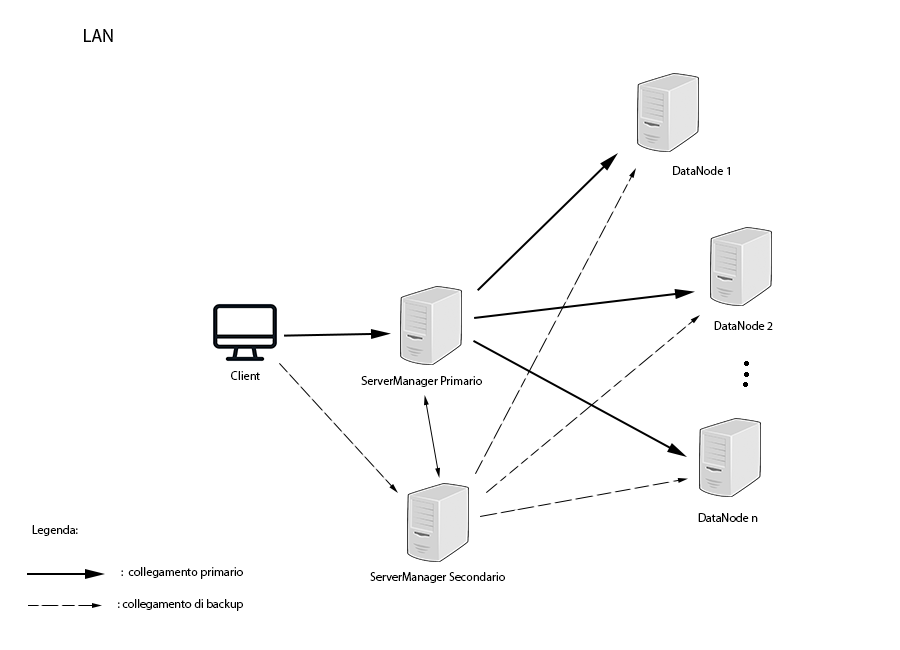
<style>
.page{position:relative;width:900px;height:650px;background:#ffffff}
.page>*{position:absolute;margin:0}
.t1{font:18px "MyriadPro-Regular";color:#000000}
.t2{font:12px "MyriadPro-Regular";color:#000000}
</style>
<div class="page">
<p class="t1" style="left:84px;top:29px;width:29px;height:13px">LAN</p>
<p class="t2" style="left:673px;top:166px;width:57px;height:9px">DataNode 1</p>
<p class="t2" style="left:714px;top:321px;width:59px;height:9px">DataNode 2</p>
<p class="t2" style="left:231px;top:371px;width:29px;height:9px">Client</p>
<p class="t2" style="left:361px;top:376px;width:121px;height:11px">ServerManager Primario</p>
<p class="t2" style="left:698px;top:513px;width:60px;height:9px">DataNode n</p>
<p class="t2" style="left:32px;top:525px;width:46px;height:11px">Legenda:</p>
<p class="t2" style="left:121px;top:567px;width:122px;height:12px">:  collegamento primario</p>
<p class="t2" style="left:370px;top:572px;width:135px;height:11px">ServerManager Secondario</p>
<p class="t2" style="left:118px;top:599px;width:125px;height:12px">: collegamento di backup</p>
</div>
